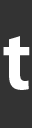
<style>
.page{position:relative;width:32px;height:128px;background:#333333}
.page>*{position:absolute;margin:0}
.t1{font:75px "AdobeGothicStd-Bold";color:#ffffff}
</style>
<div class="page">
<p class="t1" style="left:3px;top:36px;width:27px;height:54px">t</p>
</div>
